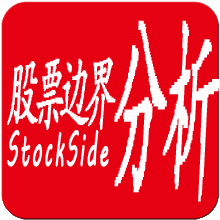
<style>
.page{position:relative;width:220px;height:220px;background:#e50112}
.page>*{position:absolute;margin:0}
.t1{font:196px "¿¬Ìå";letter-spacing:-0.1em;color:#fefcfc;font-weight:bold;font-style:italic;scale:0.29 1}
.t2{font:80px "¿¬Ìå";letter-spacing:-0.2em;color:#fefcfc;font-weight:bold;font-style:italic;scale:0.4 1}
.t3{font:46.7px "MVBoli";letter-spacing:0.1em;color:#fefcfc;font-weight:bold;scale:0.4 1}
</style>
<div class="page">
<p class="t1" style="left:114px;top:20px;width:106px;height:182px">分析</p>
<p class="t2" style="left:7px;top:57px;width:109px;height:73px">股票边界</p>
<p class="t3" style="left:7px;top:130px;width:102px;height:37px">StockSide</p>
</div>
